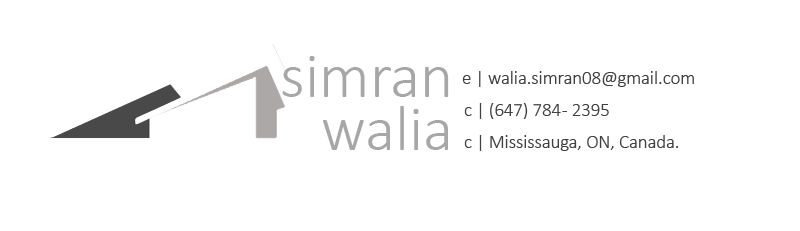
<style>
.page{position:relative;width:800px;height:231px;background:#ffffff}
.page>*{position:absolute;margin:0}
.t1{font:64px "Calibri-Light";color:#a7a7a7}
.t2{font:18.7px "Calibri-Light";color:#414141}
</style>
<div class="page">
<p class="t1" style="left:282px;top:56px;width:167px;height:41px">simran</p>
<p class="t2" style="left:462px;top:71px;width:232px;height:16px">e | walia.simran08@gmail.com</p>
<p class="t1" style="left:323px;top:106px;width:125px;height:44px">walia</p>
<p class="t2" style="left:464px;top:103px;width:145px;height:16px">c | (647) 784 - 2395</p>
<p class="t2" style="left:464px;top:135px;width:214px;height:16px">c | Mississauga, ON, Canada.</p>
</div>
